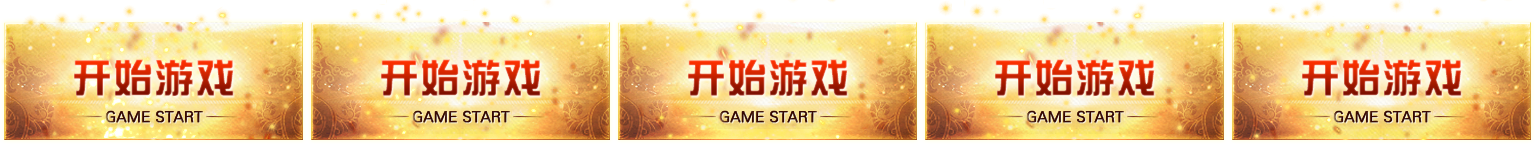
<style>
.page{position:relative;width:1535px;height:144px}
.page>*{position:absolute;margin:0}
.t1{font:40px "DFZongYi-Bd-80-Win-GB";font-weight:bold}
</style>
<div class="page">
<p class="t1" style="left:74px;top:59px;width:160px;height:37px">开始游戏</p>
<p class="t1" style="left:381px;top:59px;width:160px;height:37px">开始游戏</p>
<p class="t1" style="left:688px;top:59px;width:160px;height:37px">开始游戏</p>
<p class="t1" style="left:995px;top:59px;width:160px;height:37px">开始游戏</p>
<p class="t1" style="left:1302px;top:59px;width:160px;height:37px">开始游戏</p>
</div>
